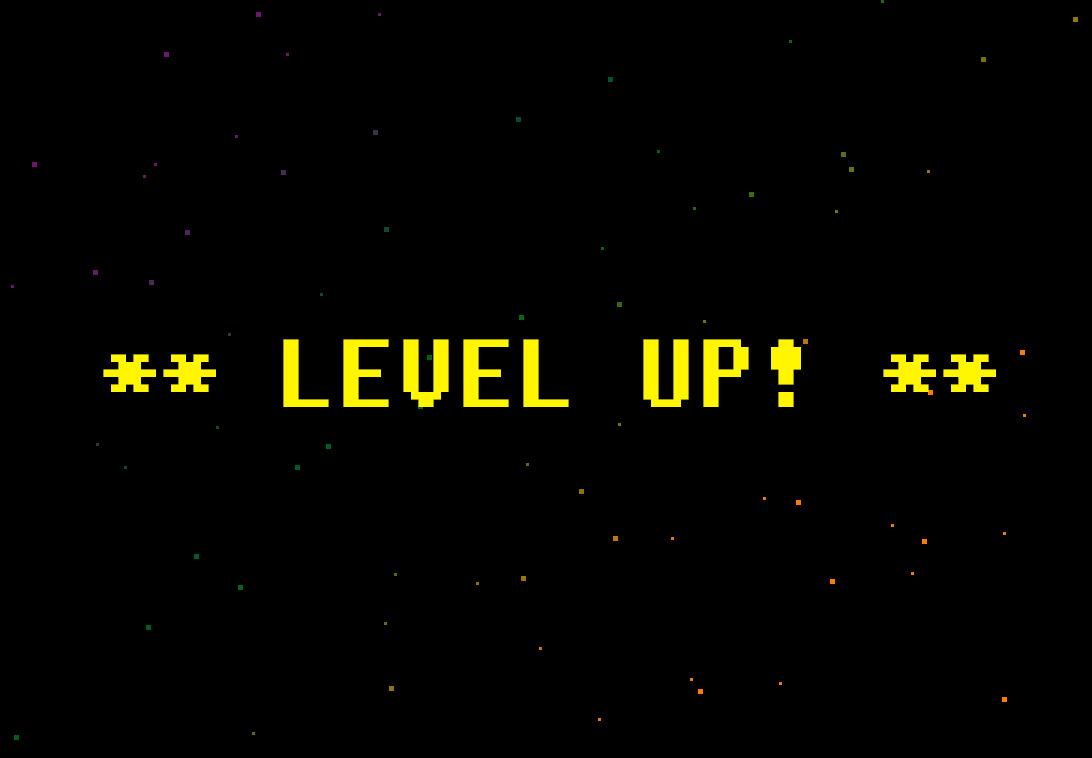
<style>
.page{position:relative;width:1092px;height:758px;background:#000000}
.page>*{position:absolute;margin:0}
.t1{font:96px "Fixedsys";color:#fff600}
</style>
<div class="page">
<p class="t1" style="left:103px;top:339px;width:893px;height:68px">** LEVEL UP! **</p>
</div>
